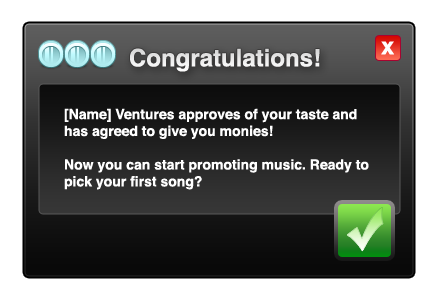
<style>
.page{position:relative;width:440px;height:300px;background:#ffffff}
.page>*{position:absolute;margin:0}
.t1{font:24px "Helvetica-Bold";color:#ffffff}
.t2{font:14px "Helvetica-Bold";color:#ffffff}
</style>
<div class="page">
<p class="t1" style="left:381px;top:41px;width:13px;height:14px">x</p>
<p class="t1" style="left:130px;top:48px;width:190px;height:24px">Congratulations!</p>
<p class="t2" style="left:64px;top:108px;width:305px;height:82px">[Name] Ventures approves of your taste and has agreed to give you monies! <br><br>Now you can start promoting music. Ready to pick your first song?</p>
</div>
